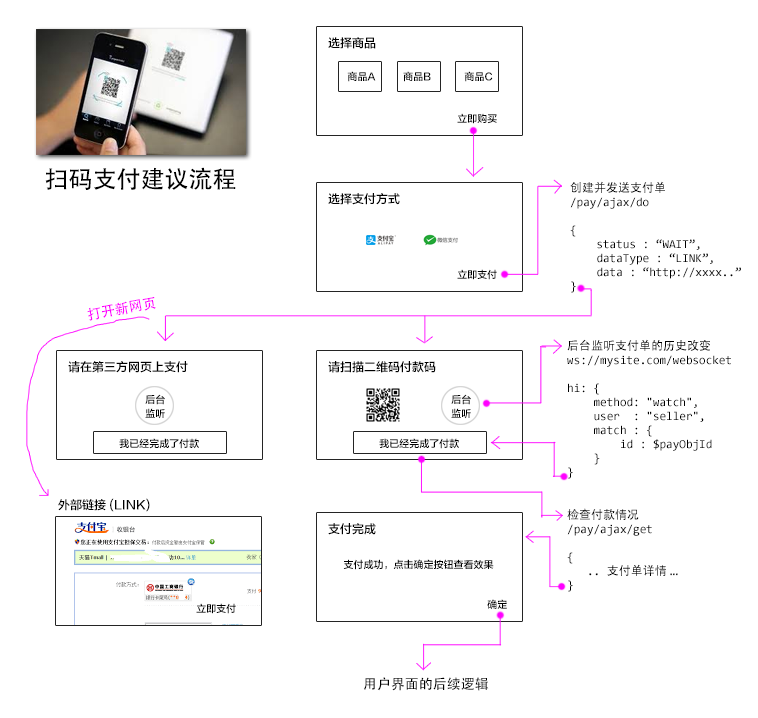
<style>
.page{position:relative;width:758px;height:718px;background:#ffffff}
.page>*{position:absolute;margin:0}
.t1{font:12px "FZLTZHK--GBK1-0";color:#000000}
.t2{font:10px "FZLTZHK--GBK1-0";color:#000000}
.t3{font:24px "AdobeHeitiStd-Regular";color:#000000}
.t4{font:12px/14px "Consolas";color:#000000}
.t5{font:12px/14px "AdobeHeitiStd-Regular";color:#000000}
.t6{font:14px "AdobeHeitiStd-Regular";color:#ff00ff}
.t7{font:10px/14px "FZLTZHK--GBK1-0";color:#000000}
.t8{font:14px "AdobeHeitiStd-Regular";color:#000000}
</style>
<div class="page">
<p class="t1" style="left:328px;top:37px;width:48px;height:12px">选择商品</p>
<p class="t2" style="left:347px;top:71px;width:146px;height:11px">商品A          商品B            商品C</p>
<p class="t2" style="left:457px;top:113px;width:40px;height:11px">立即购买</p>
<p class="t3" style="left:45px;top:167px;width:191px;height:23px">扫码支付建议流程</p>
<p class="t4" style="left:570px;top:181px;width:171px;height:112px"><span class="t5">创建并发送支付单</span><br>/pay/ajax/do<br><br>{<br>    status : “WAIT”,<br>    dataType : “LINK”,<br>    data : “http://xxxx..”<br>}</p>
<p class="t1" style="left:328px;top:193px;width:72px;height:12px">选择支付方式</p>
<p class="t2" style="left:457px;top:269px;width:40px;height:11px">立即支付</p>
<p class="t6" style="left:87px;top:297px;width:69px;height:24px;rotate:-11deg">打开新网页</p>
<p class="t4" style="left:567px;top:339px;width:164px;height:140px"><span class="t5">后台监听支付单的历史改变</span><br>ws://mysite.com/websocket<br><br>hi: {<br>    method: "watch",<br>    user  : "seller",<br>    match : {<br>        id : $payObjId<br>    }<br>}</p>
<p class="t1" style="left:68px;top:361px;width:120px;height:12px">请在第三方网页上支付</p>
<p class="t1" style="left:328px;top:361px;width:108px;height:12px">请扫描二维码付款码</p>
<p class="t7" style="left:145px;top:394px;width:20px;height:25px;text-align:center">后台<br>监听</p>
<p class="t7" style="left:451px;top:394px;width:20px;height:25px;text-align:center">后台<br>监听</p>
<p class="t2" style="left:119px;top:438px;width:80px;height:11px">我已经完成了付款</p>
<p class="t2" style="left:379px;top:438px;width:80px;height:11px">我已经完成了付款</p>
<p class="t1" style="left:58px;top:498px;width:92px;height:14px">外部链接 (LINK)</p>
<p class="t4" style="left:567px;top:508px;width:111px;height:84px"><span class="t5">检查付款情况<br></span>/pay/ajax/get<br><br>{<br>   .. <span class="t5">支付单详情 ...<br></span>}</p>
<p class="t1" style="left:328px;top:523px;width:48px;height:12px">支付完成</p>
<p class="t2" style="left:343px;top:559px;width:151px;height:11px">支付成功，点击确定按钮查看效果</p>
<p class="t2" style="left:196px;top:603px;width:40px;height:11px">立即支付</p>
<p class="t2" style="left:487px;top:599px;width:20px;height:10px">确定</p>
<p class="t8" style="left:364px;top:677px;width:125px;height:14px">用户界面的后续逻辑</p>
</div>
